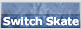
<style>
.page{position:relative;width:81px;height:30px}
.page>*{position:absolute;margin:0}
.t1{font:10.4px "Verdana-Bold";color:#ffffff}
</style>
<div class="page">
<p class="t1" style="left:3px;top:17px;width:76px;height:9px">Switch Skate</p>
</div>
